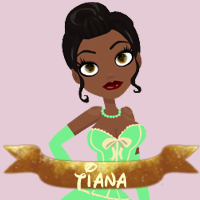
<style>
.page{position:relative;width:200px;height:200px;background:#e4cbd6}
.page>*{position:absolute;margin:0}
.t1{font:37.4px "Waltograph";color:#fcfac7}
</style>
<div class="page">
<p class="t1" style="left:74px;top:162px;width:53px;height:29px">tiana</p>
</div>
